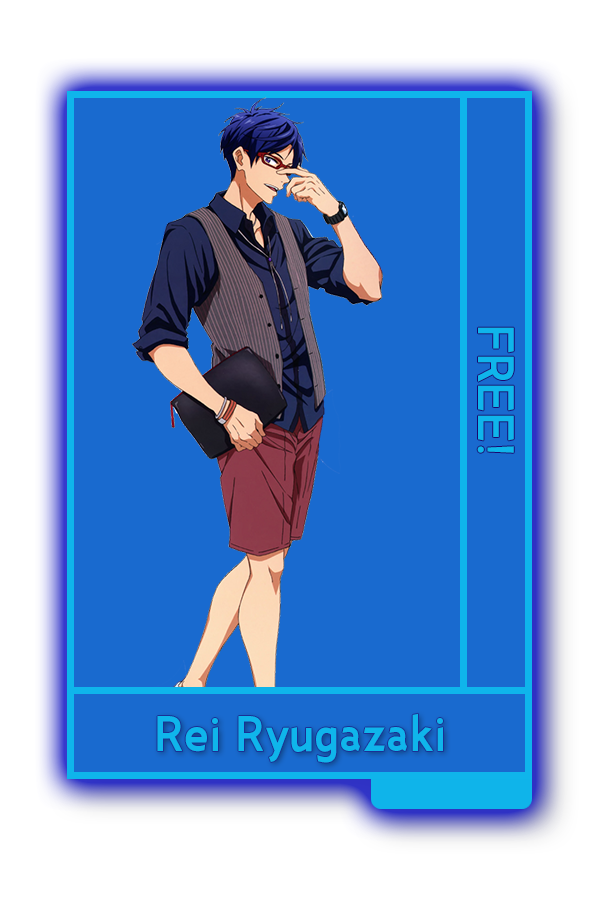
<style>
.page{position:relative;width:600px;height:900px;background:#196acf}
.page>*{position:absolute;margin:0}
.t1{font:47.8px "Ancillary-Bold";color:#0fb5eb}
.t2{font:46.7px "Ancillary-Bold";color:#0fb5eb}
</style>
<div class="page">
<p class="t1" style="left:477px;top:327px;width:37px;height:126px;rotate:90deg">FREE!</p>
<p class="t2" style="left:157px;top:713px;width:286px;height:50px">Rei Ryugazaki</p>
</div>
